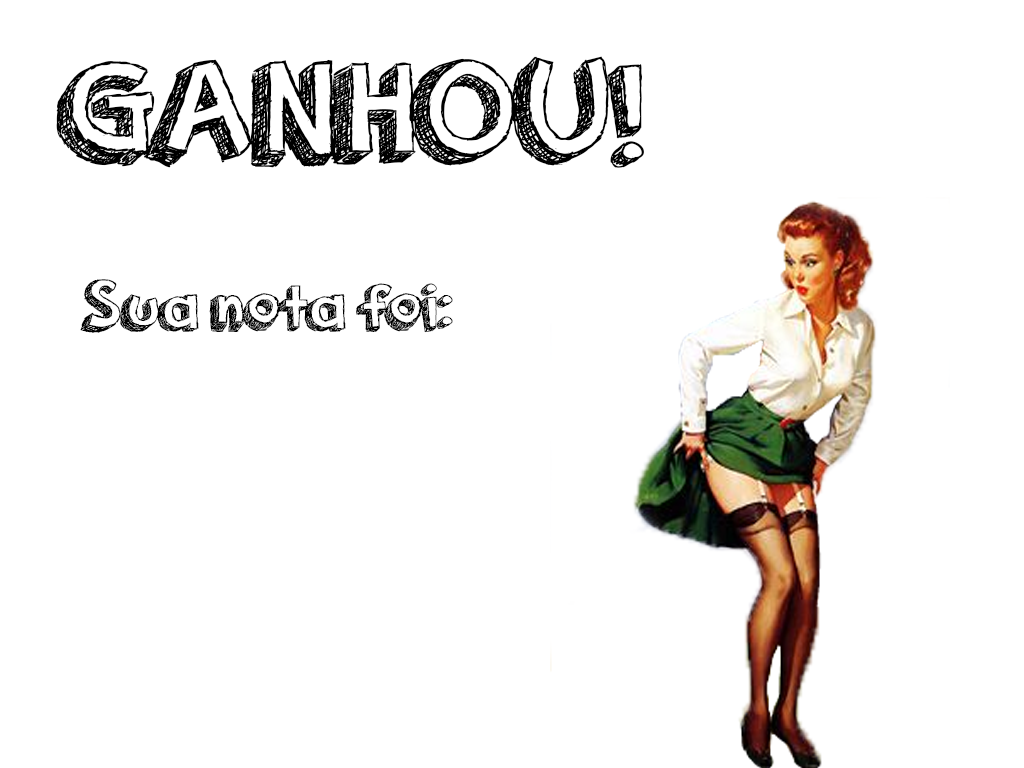
<style>
.page{position:relative;width:1024px;height:768px;background:#ffffff}
.page>*{position:absolute;margin:0}
.t1{font:150px "orangejuice";color:#000000}
.t2{font:72px "orangejuice";color:#000000}
</style>
<div class="page">
<p class="t1" style="left:56px;top:56px;width:588px;height:112px">GANHOU!</p>
<p class="t2" style="left:80px;top:279px;width:373px;height:54px">Sua nota foi:</p>
</div>
